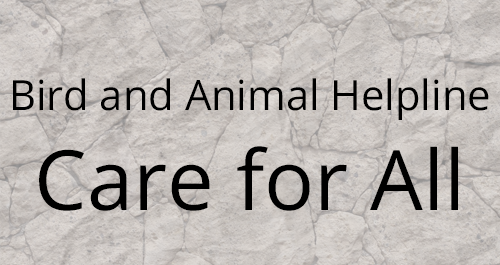
<style>
.page{position:relative;width:500px;height:265px}
.page>*{position:absolute;margin:0}
.t1{font:41.7px "OpenSans-Regular";color:#000000}
.t2{font:83.3px "OpenSans-Regular";color:#000000}
</style>
<div class="page">
<p class="t1" style="left:13px;top:78px;width:476px;height:133px;text-align:center">Bird and Animal Helpline<br><span class="t2">Care for All</span></p>
</div>
